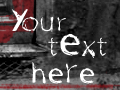
<style>
.page{position:relative;width:120px;height:90px}
.page>*{position:absolute;margin:0}
.t1{font:30px "OneWayRegular";letter-spacing:0.05em;color:#ffffff}
</style>
<div class="page">
<p class="t1" style="left:12px;top:9px;width:54px;height:23px">Your</p>
<p class="t1" style="left:48px;top:34px;width:59px;height:24px">tExt</p>
<p class="t1" style="left:32px;top:62px;width:63px;height:22px">heRe</p>
</div>
